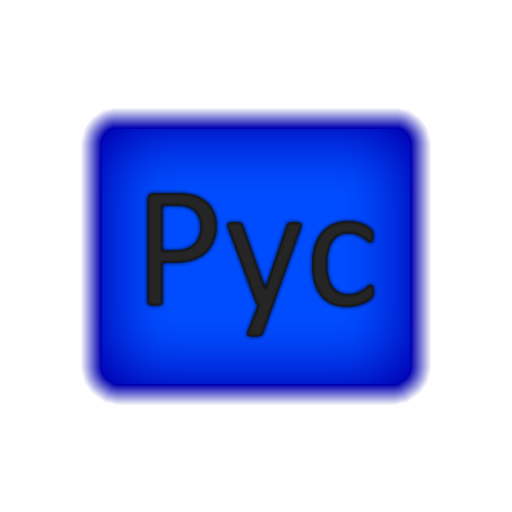
<style>
.page{position:relative;width:512px;height:512px;background:#ffffff}
.page>*{position:absolute;margin:0}
.t1{font:177px "Calibri";color:#252525}
</style>
<div class="page">
<p class="t1" style="left:147px;top:193px;width:227px;height:144px">Рус</p>
</div>
